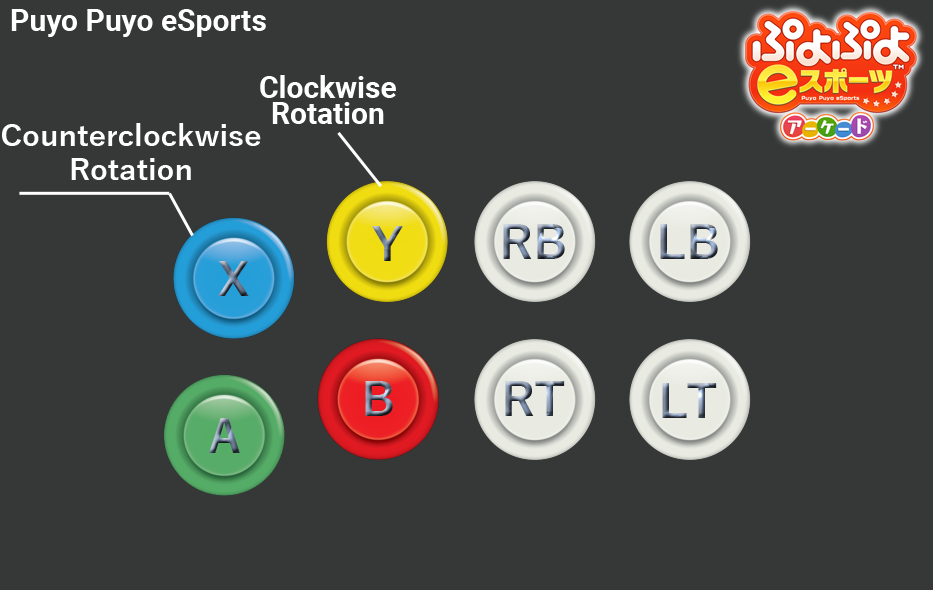
<style>
.page{position:relative;width:933px;height:590px;background:#363838}
.page>*{position:absolute;margin:0}
.t1{font:30px "Roboto-Bold";color:#ffffff}
.t2{font:30px/26px "Roboto-Bold";color:#ffffff}
.t3{font:30px/34px "YuGothic-Bold";color:#ffffff}
</style>
<div class="page">
<p class="t1" style="left:11px;top:9px;width:255px;height:28px">Puyo Puyo eSports</p>
<p class="t2" style="left:260px;top:75px;width:136px;height:49px;text-align:center">Clockwise<br>Rotation</p>
<p class="t3" style="left:2px;top:123px;width:259px;height:57px;text-align:center">Counterclockwise<br>Rotation</p>
</div>
